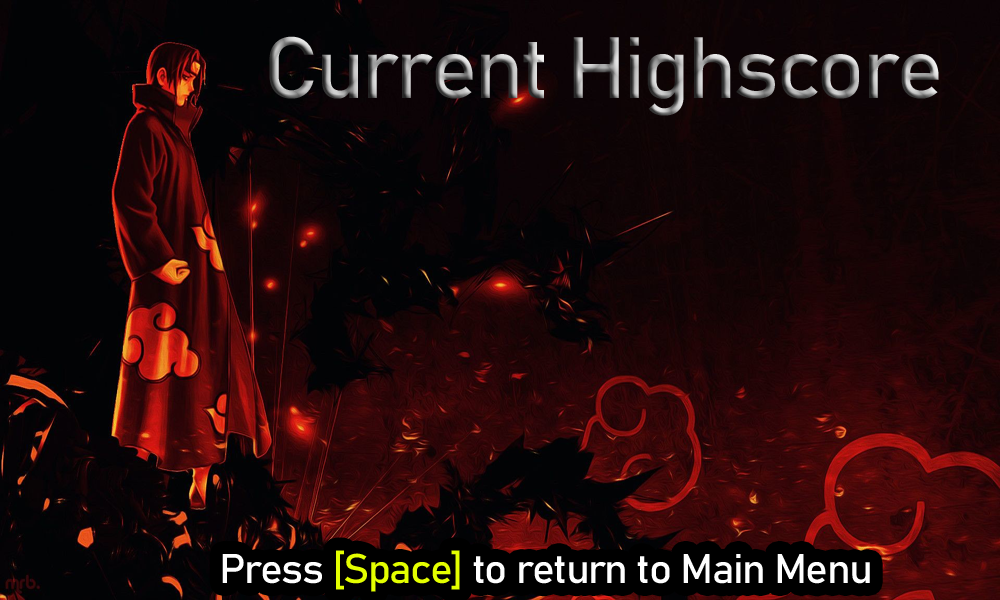
<style>
.page{position:relative;width:1000px;height:600px}
.page>*{position:absolute;margin:0}
.t1{font:85.4px "Bahnschrift";letter-spacing:-0.04em;scale:1.04 1}
.t2{font:41px "Bahnschrift";letter-spacing:-0.04em;color:#ffffff;scale:1.04 1}
.t3{font:41px "Bahnschrift";letter-spacing:-0.04em;color:#e4ff00;scale:1.04 1}
</style>
<div class="page">
<p class="t1" style="left:269px;top:36px;width:670px;height:80px">Current Highscore</p>
<p class="t2" style="left:222px;top:550px;width:648px;height:42px">Press <span class="t3">[Space]</span> to return to Main Menu</p>
</div>
